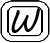
<style>
.page{position:relative;width:50px;height:43px;background:#ffffff}
.page>*{position:absolute;margin:0}
.t1{font:32px "MVBoli";color:#000000}
</style>
<div class="page">
<p class="t1" style="left:11px;top:8px;width:29px;height:25px">W</p>
</div>
